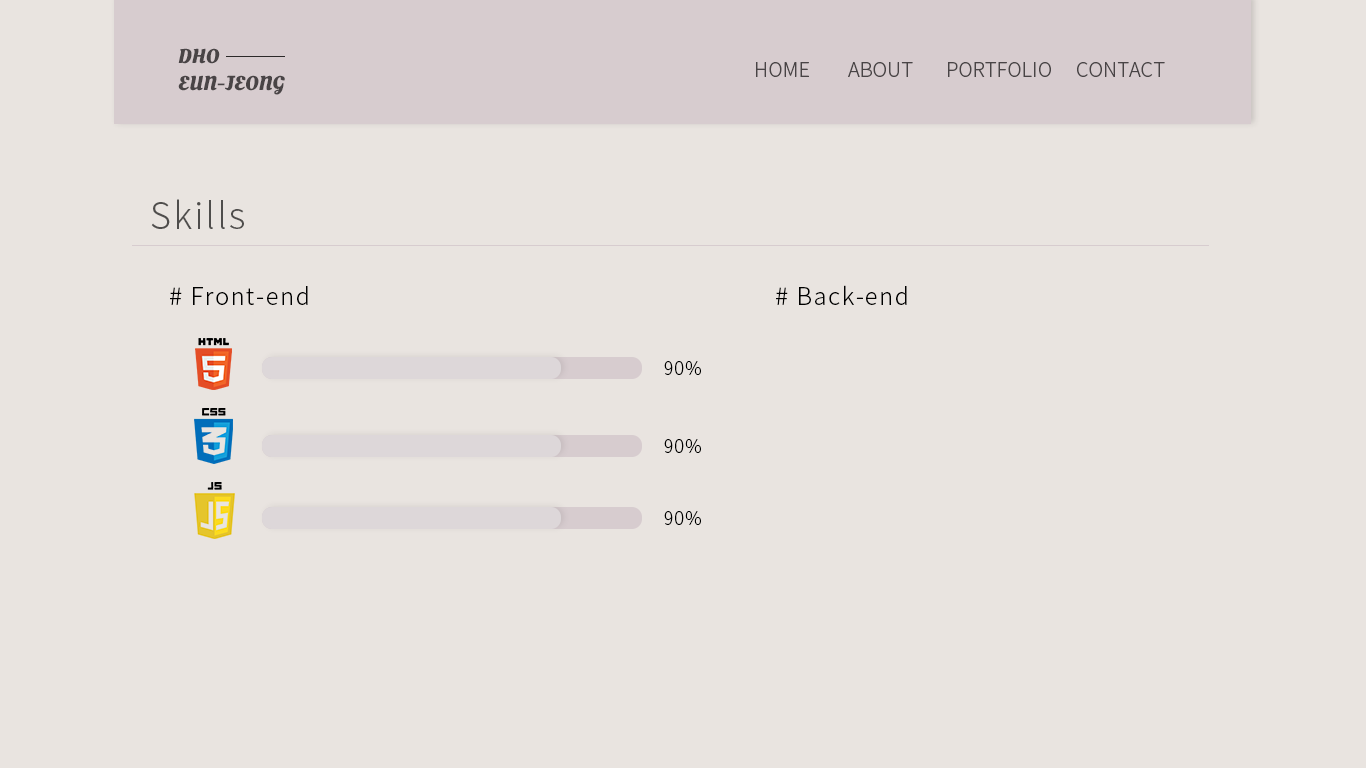
<style>
.page{position:relative;width:1366px;height:768px;background:#e9e4e0}
.page>*{position:absolute;margin:0}
.t1{font:20px/27px "OleoScript-Bold";color:#494446}
.t2{font:20px "NotoSansCJKkr-Light";color:#494446}
.t3{font:36px "NotoSansCJKkr-Light";letter-spacing:0.06em;color:#4f4d4c}
.t4{font:24px "NotoSansCJKkr-Light";letter-spacing:0.06em;color:#000000}
.t5{font:18px "NotoSansCJKkr-Light";letter-spacing:0.06em;color:#000000}
</style>
<div class="page">
<p class="t1" style="left:178px;top:48px;width:107px;height:47px">DHO<br>EUN-JEONG</p>
<p class="t2" style="left:756px;top:62px;width:53px;height:15px">HOME</p>
<p class="t2" style="left:848px;top:62px;width:65px;height:15px">ABOUT</p>
<p class="t2" style="left:948px;top:62px;width:103px;height:15px">PORTFOLIO</p>
<p class="t2" style="left:1077px;top:62px;width:88px;height:15px">CONTACT</p>
<p class="t3" style="left:151px;top:199px;width:93px;height:30px">Skills</p>
<p class="t4" style="left:170px;top:286px;width:138px;height:19px"># Front-end</p>
<p class="t4" style="left:776px;top:285px;width:131px;height:20px"># Back-end</p>
<p class="t5" style="left:664px;top:361px;width:37px;height:14px">90%</p>
<p class="t5" style="left:664px;top:439px;width:37px;height:14px">90%</p>
<p class="t5" style="left:664px;top:511px;width:37px;height:14px">90%</p>
</div>
